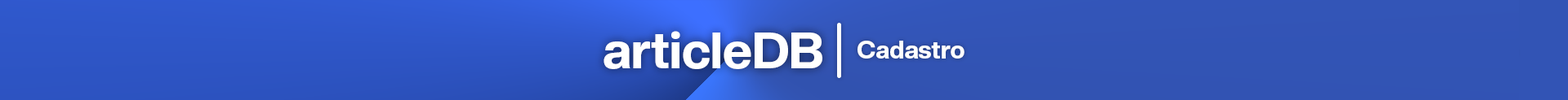
<style>
.page{position:relative;width:1568px;height:100px}
.page>*{position:absolute;margin:0}
.t1{font:50.7px "CreatoDisplay-ExtraBold";color:#ffffff}
.t2{font:24.9px "CreatoDisplay-ExtraBold";color:#ffffff}
</style>
<div class="page">
<p class="t1" style="left:604px;top:31px;width:218px;height:38px">articleDB</p>
<p class="t2" style="left:858px;top:41px;width:106px;height:18px">Cadastro</p>
</div>
